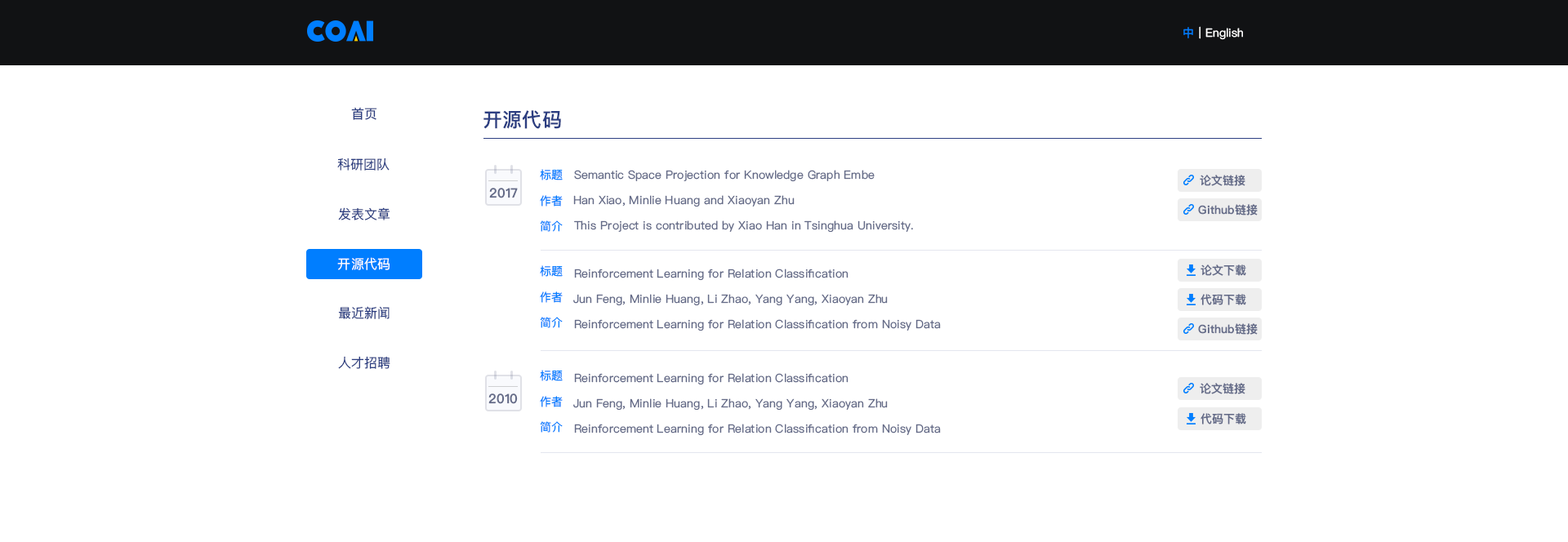
<style>
.page{position:relative;width:1568px;height:542px;background:#ffffff}
.page>*{position:absolute;margin:0}
.t1{font:11.4px "PingFangSC-Regular";letter-spacing:0.01em;color:#007eff}
.t2{font:11.4px "PingFangSC-Regular";letter-spacing:0.01em;color:#ffffff}
.t3{font:13.1px "PingFangSC-Regular";letter-spacing:0.01em;color:#2c3e81}
.t4{font:19.6px "PingFangSC-Semibold";letter-spacing:0.01em;color:#2c3e81}
.t5{font:11.4px "PingFangSC-Regular";letter-spacing:0.01em;color:#646b88}
.t6{font:11.4px "PingFangSC-Semibold";letter-spacing:0.01em;color:#646b88}
.t7{font:13.1px "PingFangSC-Semibold";letter-spacing:0.01em;color:#646b88}
.t8{font:13.1px "PingFangSC-Regular";letter-spacing:0.01em;color:#ffffff}
</style>
<div class="page">
<p class="t1" style="left:1183px;top:27px;width:10px;height:11px">中</p>
<p class="t2" style="left:1199px;top:26px;width:44px;height:14px">| English</p>
<p class="t3" style="left:351px;top:107px;width:26px;height:13px">首页</p>
<p class="t4" style="left:483px;top:110px;width:78px;height:19px">开源代码</p>
<p class="t3" style="left:337px;top:158px;width:53px;height:13px">科研团队</p>
<p class="t1" style="left:540px;top:169px;width:23px;height:11px">标题</p>
<p class="t5" style="left:574px;top:170px;width:301px;height:12px">Semantic Space Projection for Knowledge Graph Embe</p>
<p class="t6" style="left:1200px;top:175px;width:45px;height:11px">论文链接</p>
<p class="t7" style="left:489px;top:188px;width:29px;height:10px">2017</p>
<p class="t1" style="left:540px;top:195px;width:23px;height:12px">作者</p>
<p class="t5" style="left:573px;top:195px;width:222px;height:12px">Han Xiao, Minlie Huang and Xiaoyan Zhu</p>
<p class="t3" style="left:338px;top:207px;width:52px;height:13px">发表文章</p>
<p class="t6" style="left:1198px;top:204px;width:60px;height:12px">Github链接</p>
<p class="t1" style="left:540px;top:220px;width:23px;height:12px">简介</p>
<p class="t5" style="left:574px;top:220px;width:339px;height:13px">This Project is contributed by Xiao Han in Tsinghua University.</p>
<p class="t8" style="left:337px;top:257px;width:53px;height:13px">开源代码</p>
<p class="t1" style="left:540px;top:265px;width:23px;height:12px">标题</p>
<p class="t5" style="left:574px;top:269px;width:275px;height:12px">Reinforcement Learning for Relation Classification</p>
<p class="t6" style="left:1200px;top:265px;width:46px;height:11px">论文下载</p>
<p class="t1" style="left:540px;top:292px;width:23px;height:11px">作者</p>
<p class="t5" style="left:573px;top:294px;width:315px;height:12px">Jun Feng, Minlie Huang, Li Zhao, Yang Yang, Xiaoyan Zhu</p>
<p class="t6" style="left:1200px;top:294px;width:46px;height:11px">代码下载</p>
<p class="t3" style="left:338px;top:306px;width:52px;height:13px">最近新闻</p>
<p class="t1" style="left:540px;top:317px;width:23px;height:11px">简介</p>
<p class="t5" style="left:574px;top:319px;width:367px;height:13px">Reinforcement Learning for Relation Classification from Noisy Data</p>
<p class="t6" style="left:1198px;top:323px;width:60px;height:12px">Github链接</p>
<p class="t3" style="left:338px;top:356px;width:52px;height:13px">人才招聘</p>
<p class="t1" style="left:540px;top:370px;width:23px;height:11px">标题</p>
<p class="t5" style="left:574px;top:373px;width:275px;height:12px">Reinforcement Learning for Relation Classification</p>
<p class="t6" style="left:1200px;top:383px;width:45px;height:11px">论文链接</p>
<p class="t7" style="left:488px;top:394px;width:30px;height:10px">2010</p>
<p class="t1" style="left:540px;top:396px;width:23px;height:12px">作者</p>
<p class="t5" style="left:573px;top:399px;width:315px;height:12px">Jun Feng, Minlie Huang, Li Zhao, Yang Yang, Xiaoyan Zhu</p>
<p class="t6" style="left:1200px;top:413px;width:46px;height:12px">代码下载</p>
<p class="t1" style="left:540px;top:421px;width:23px;height:12px">简介</p>
<p class="t5" style="left:574px;top:424px;width:367px;height:12px">Reinforcement Learning for Relation Classification from Noisy Data</p>
</div>
